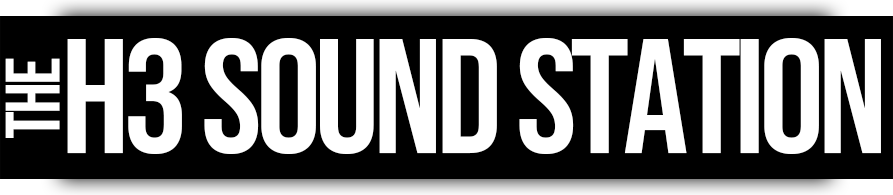
<style>
.page{position:relative;width:893px;height:195px;background:#000000}
.page>*{position:absolute;margin:0}
.t1{font:163.1px "BebasNeue-Regular";letter-spacing:-0.04em;color:#ffffff}
.t2{font:76.8px "BebasNeue-Regular";letter-spacing:-0.04em;color:#ffffff}
</style>
<div class="page">
<p class="t1" style="left:67px;top:38px;width:814px;height:116px">H3 SOUND STATION</p>
<p class="t2" style="left:5px;top:58px;width:55px;height:80px;rotate:-90deg">the</p>
</div>
